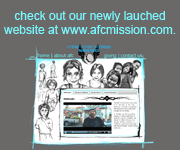
<style>
.page{position:relative;width:180px;height:150px;background:#6b6868}
.page>*{position:absolute;margin:0}
.t1{font:12px "ArialMT";color:#79f8ff}
</style>
<div class="page">
<p class="t1" style="left:4px;top:11px;width:172px;height:23px;text-align:center">check out our newly lauched<br>website at www.afcmission.com.</p>
</div>
